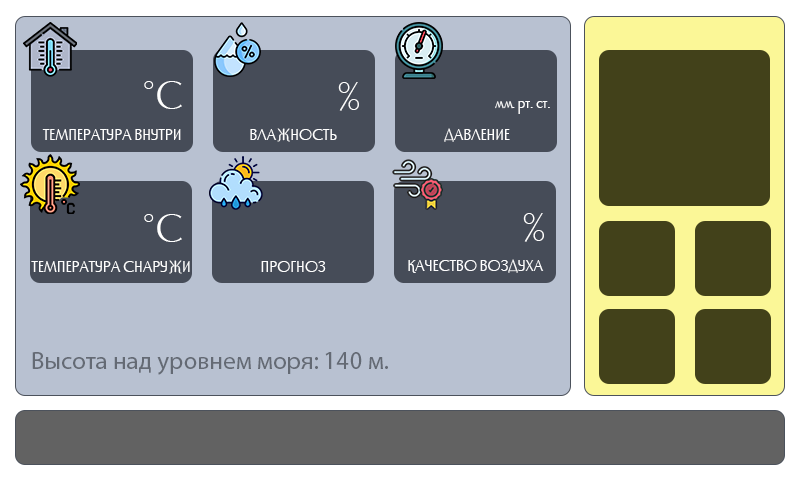
<style>
.page{position:relative;width:800px;height:480px;background:#b8c1d1}
.page>*{position:absolute;margin:0}
.t1{font:41.7px "NK170";color:#fefefe}
.t2{font:16.7px "NK170";color:#ffffff}
.t3{font:41.7px "NK170";color:#ffffff}
.t4{font:16.7px "NK170";color:#fefefe}
.t5{font:16.7px "NK170";color:#fefeff}
.t6{font:25px "MyriadPro-Regular";color:#646a74}
</style>
<div class="page">
<p class="t1" style="left:144px;top:81px;width:38px;height:28px">°C</p>
<p class="t1" style="left:338px;top:82px;width:21px;height:29px">%</p>
<p class="t2" style="left:495px;top:101px;width:55px;height:13px">мм. рт. ст.</p>
<p class="t2" style="left:42px;top:129px;width:139px;height:11px">ТЕМПЕРАТУРА ВНУТРИ</p>
<p class="t2" style="left:250px;top:128px;width:87px;height:14px">ВЛАЖНОСТЬ</p>
<p class="t2" style="left:444px;top:128px;width:66px;height:14px">ДАВЛЕНИЕ</p>
<p class="t3" style="left:144px;top:214px;width:38px;height:28px">°C</p>
<p class="t3" style="left:523px;top:213px;width:21px;height:29px">%</p>
<p class="t4" style="left:31px;top:260px;width:159px;height:14px">ТЕМПЕРАТУРА СНАРУЖИ</p>
<p class="t2" style="left:261px;top:261px;width:65px;height:11px">ПРОГНОЗ</p>
<p class="t5" style="left:408px;top:259px;width:136px;height:14px">КАЧЕСТВО ВОЗДУХА</p>
<p class="t6" style="left:32px;top:352px;width:356px;height:23px">Высота над уровнем моря: 140 м.</p>
</div>
